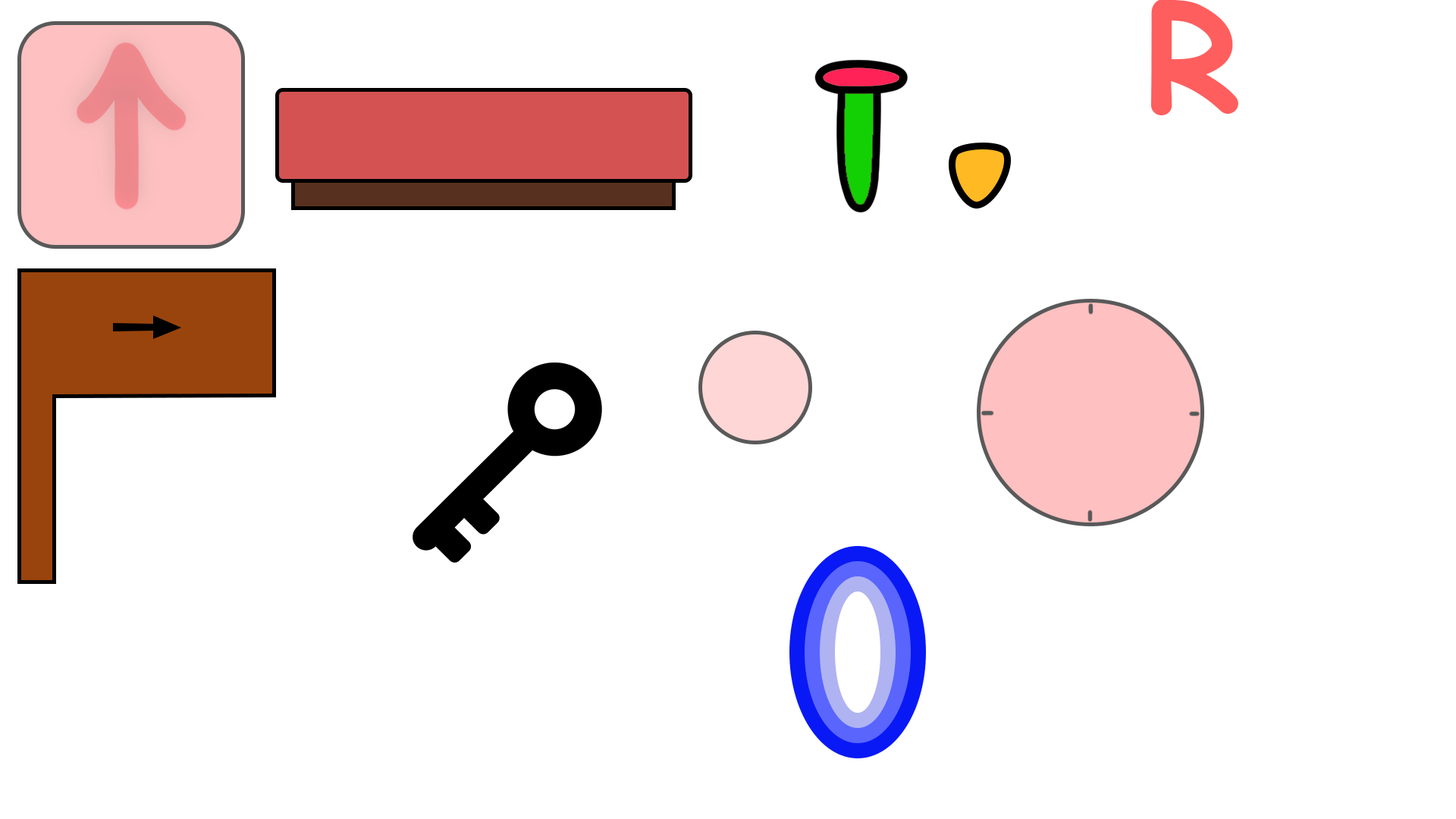
<style>
.page{position:relative;width:1456px;height:819px;background:#ffffff}
.page>*{position:absolute;margin:0}
.t1{font:151.7px "ComicSansMS-Bold";color:#ff5e5e}
</style>
<div class="page">
<p class="t1" style="left:1151px;top:0px;width:87px;height:115px">R</p>
</div>
